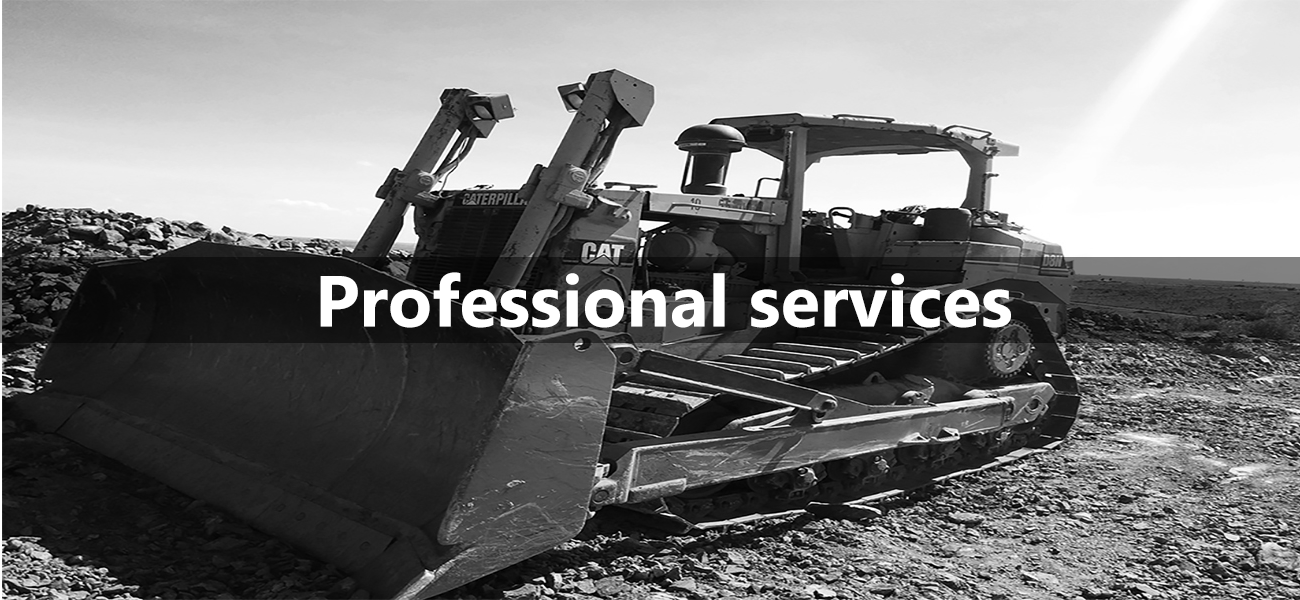
<style>
.page{position:relative;width:1300px;height:600px}
.page>*{position:absolute;margin:0}
.t1{font:72px "MicrosoftNewTaiLue-Bold";color:#ffffff}
</style>
<div class="page">
<p class="t1" style="left:320px;top:272px;width:691px;height:56px">Professional services</p>
</div>
